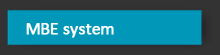
<style>
.page{position:relative;width:220px;height:55px;background:#0097b9}
.page>*{position:absolute;margin:0}
.t1{font:18px "Calibri";color:#ffffff;font-weight:bold}
</style>
<div class="page">
<p class="t1" style="left:26px;top:23px;width:88px;height:15px">MBE system</p>
</div>
